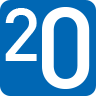
<style>
.page{position:relative;width:96px;height:96px;background:#0067b4}
.page>*{position:absolute;margin:0}
.t1{font:74.7px "DIN-Medium";letter-spacing:-0.3em;color:#ffffff}
.t2{font:114.7px "DIN-Medium";letter-spacing:-0.3em;color:#ffffff}
</style>
<div class="page">
<p class="t1" style="left:5px;top:8px;width:32px;height:53px">2</p>
<p class="t2" style="left:42px;top:7px;width:48px;height:82px">0</p>
</div>
